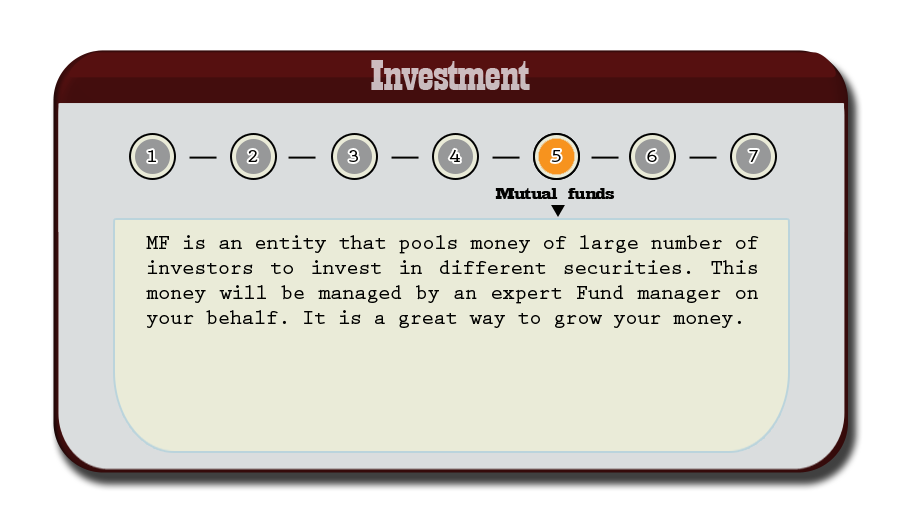
<style>
.page{position:relative;width:910px;height:512px;background:#eaebd8}
.page>*{position:absolute;margin:0}
.t1{font:44.6px "Playbill";letter-spacing:-0.025em;color:#c8bbbe;scale:1.61 1}
.t2{font:18.8px "PrestigeEliteStd-Bd";letter-spacing:-0.025em;color:#020201;scale:1.18 1}
.t3{font:17.3px "Playbill";letter-spacing:-0.025em;color:#020201;scale:2.47 1}
.t4{font:20.8px "PrestigeEliteStd-Bd";letter-spacing:-0.025em;color:#020201}
</style>
<div class="page">
<p class="t1" style="left:371px;top:60px;width:159px;height:30px">Investment</p>
<p class="t2" style="left:148px;top:150px;width:8px;height:12px">1</p>
<p class="t2" style="left:248px;top:150px;width:10px;height:12px">2</p>
<p class="t2" style="left:349px;top:150px;width:9px;height:12px">3</p>
<p class="t2" style="left:449px;top:149px;width:11px;height:13px">4</p>
<p class="t2" style="left:551px;top:150px;width:10px;height:12px">5</p>
<p class="t2" style="left:647px;top:150px;width:10px;height:12px">6</p>
<p class="t2" style="left:749px;top:150px;width:9px;height:12px">7</p>
<p class="t3" style="left:495px;top:188px;width:120px;height:11px">Mutual funds</p>
<p class="t4" style="left:146px;top:235px;width:613px;height:93px;text-align:justify">MF is an entity that pools money of large number of investors to invest in different securities. This money will be managed by an expert Fund manager on your behalf. It is a great way to grow your money.</p>
</div>
